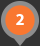
<style>
.page{position:relative;width:40px;height:46px;background:#333333}
.page>*{position:absolute;margin:0}
.t1{font:16px "MyriadPro-Bold";color:#ffffff}
</style>
<div class="page">
<p class="t1" style="left:16px;top:14px;width:8px;height:11px">2</p>
</div>
